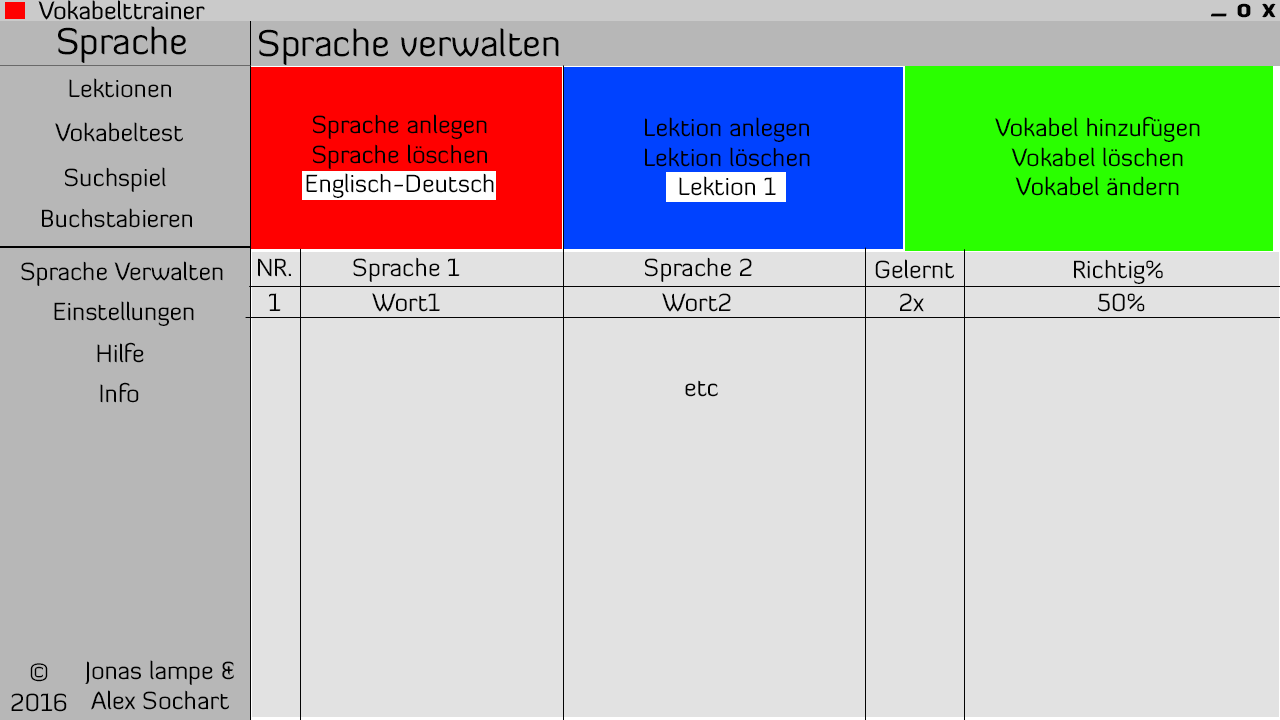
<style>
.page{position:relative;width:1280px;height:720px;background:#e2e2e2}
.page>*{position:absolute;margin:0}
.t1{font:24.6px "DiavloBlack-Regular";color:#000000}
.t2{font:36.9px "DiavloBook-Regular";color:#000000}
.t3{font:24.6px "DiavloBook-Regular";color:#000000}
.t4{font:24.6px "DiavloBook-Regular";color:#020202}
</style>
<div class="page">
<p class="t1" style="left:1237px;top:3px;width:14px;height:15px">o</p>
<p class="t1" style="left:1262px;top:3px;width:14px;height:15px">x</p>
<p class="t1" style="left:1211px;top:13px;width:16px;height:4px">_</p>
<p class="t2" style="left:58px;top:26px;width:128px;height:37px">Sprache</p>
<p class="t2" style="left:259px;top:28px;width:300px;height:37px">Sprache verwalten</p>
<p class="t3" style="left:69px;top:78px;width:102px;height:20px">Lektionen</p>
<p class="t3" style="left:55px;top:122px;width:128px;height:20px">Vokabeltest</p>
<p class="t3" style="left:306px;top:114px;width:188px;height:84px;text-align:center">Sprache anlegen<br>Sprache löschen<br>Englisch-Deutsch</p>
<p class="t3" style="left:645px;top:117px;width:165px;height:79px;text-align:center">Lektion anlegen<br>Lektion löschen<br>Lektion 1</p>
<p class="t3" style="left:995px;top:116px;width:205px;height:80px;text-align:center">Vokabel hinzufügen<br>Vokabel löschen<br>Vokabel ändern</p>
<p class="t3" style="left:65px;top:167px;width:102px;height:25px">Suchspiel</p>
<p class="t3" style="left:42px;top:208px;width:150px;height:20px">Buchstabieren</p>
<p class="t4" style="left:353px;top:257px;width:107px;height:25px">Sprache 1</p>
<p class="t4" style="left:645px;top:257px;width:107px;height:25px">Sprache 2</p>
<p class="t3" style="left:21px;top:261px;width:202px;height:25px">Sprache Verwalten</p>
<p class="t4" style="left:258px;top:258px;width:33px;height:19px">NR.</p>
<p class="t4" style="left:875px;top:259px;width:79px;height:20px">Gelernt</p>
<p class="t4" style="left:1074px;top:259px;width:89px;height:25px">Richtig%</p>
<p class="t4" style="left:269px;top:293px;width:12px;height:18px">1</p>
<p class="t4" style="left:372px;top:293px;width:68px;height:19px">Wort1</p>
<p class="t4" style="left:662px;top:293px;width:69px;height:19px">Wort2</p>
<p class="t4" style="left:900px;top:293px;width:24px;height:19px">2x</p>
<p class="t4" style="left:1098px;top:293px;width:47px;height:19px">50%</p>
<p class="t3" style="left:54px;top:301px;width:140px;height:25px">Einstellungen</p>
<p class="t3" style="left:97px;top:342px;width:47px;height:21px">Hilfe</p>
<p class="t3" style="left:100px;top:382px;width:39px;height:21px">Info</p>
<p class="t4" style="left:685px;top:380px;width:33px;height:17px">etc</p>
<p class="t3" style="left:11px;top:663px;width:56px;height:49px;text-align:center">©<br>2016</p>
<p class="t3" style="left:85px;top:660px;width:149px;height:50px;text-align:center">Jonas lampe &amp;<br>Alex Sochart</p>
</div>
